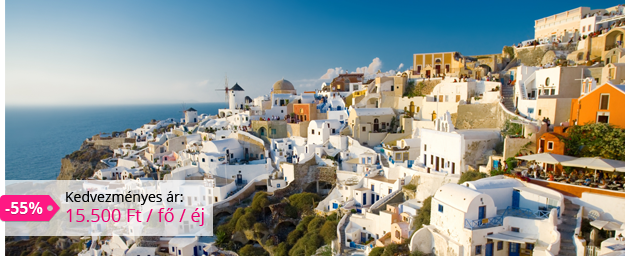
<style>
.page{position:relative;width:625px;height:256px}
.page>*{position:absolute;margin:0}
.t1{font:18px/20px "OpenSans";color:#ec006e}
.t2{font:14px/20px "OpenSans";color:#000000}
.t3{font:16px "OpenSans-Bold";color:#ffffff}
</style>
<div class="page">
<p class="t1" style="left:66px;top:191px;width:138px;height:35px"><span class="t2">Kedvezményes ár: <br></span>15.500 Ft / fő / éj</p>
<p class="t3" style="left:5px;top:202px;width:38px;height:12px">-55%</p>
</div>
